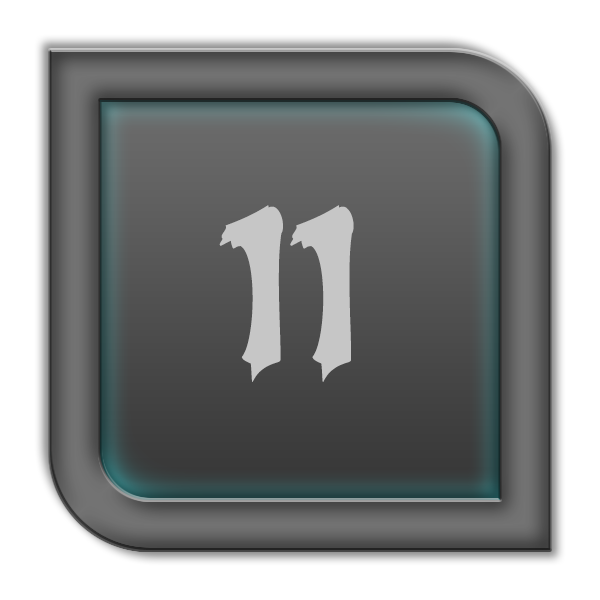
<style>
.page{position:relative;width:600px;height:600px;background:#ffffff}
.page>*{position:absolute;margin:0}
.t1{font:240px "TOXIA";color:#c6c6c6;scale:0.83 1}
</style>
<div class="page">
<p class="t1" style="left:219px;top:205px;width:135px;height:177px">11</p>
</div>
